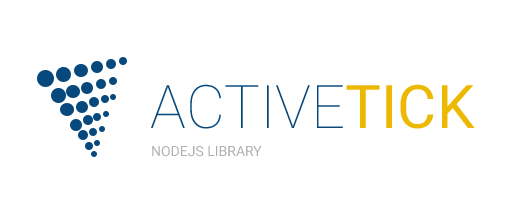
<style>
.page{position:relative;width:512px;height:218px;background:#ffffff}
.page>*{position:absolute;margin:0}
.t1{font:60px "Roboto-Thin";color:#07497d;text-transform:uppercase}
.t2{font:60px "Roboto-Regular";color:#ecb802;text-transform:uppercase}
.t3{font:14px "Roboto-Regular";color:#b0b0b0;text-transform:uppercase}
</style>
<div class="page">
<p class="t1" style="left:151px;top:84px;width:324px;height:45px">active<span class="t2">tick</span></p>
<p class="t3" style="left:152px;top:146px;width:110px;height:11px">nodejs Library</p>
</div>
